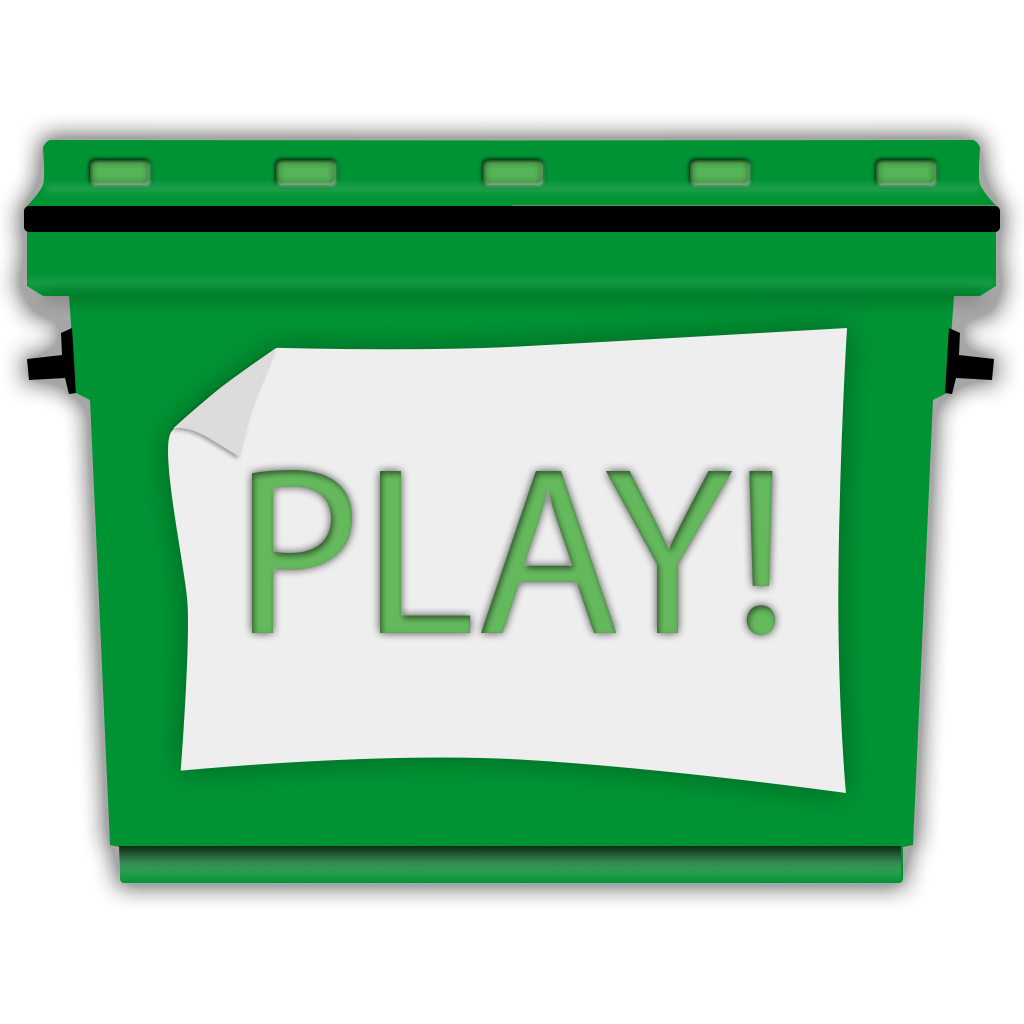
<style>
.page{position:relative;width:1024px;height:1024px;background:#ffffff}
.page>*{position:absolute;margin:0}
.t1{font:240px "MyriadPro-Regular";color:#65b95d}
</style>
<div class="page">
<p class="t1" style="left:252px;top:470px;width:523px;height:165px">PLAY!</p>
</div>
